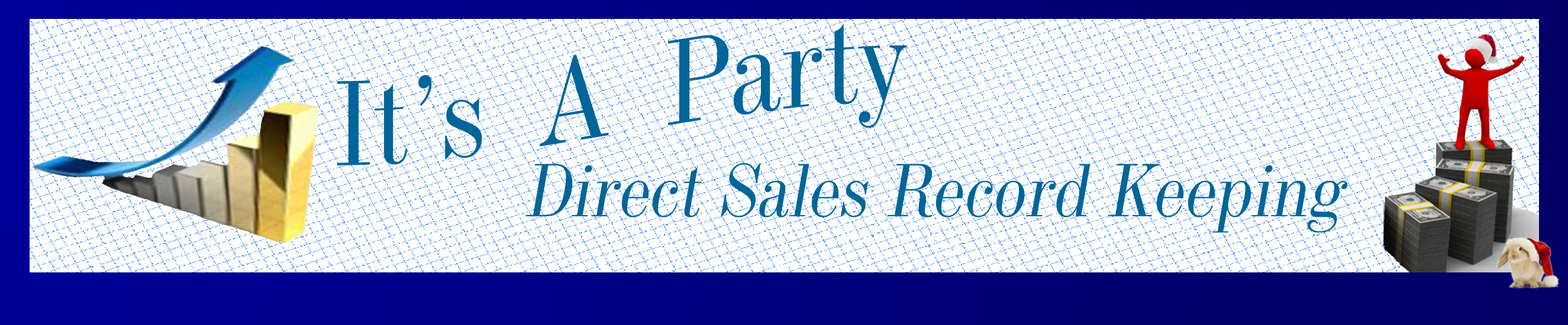
<style>
.page{position:relative;width:1568px;height:325px}
.page>*{position:absolute;margin:0}
.t1{font:117.9px "Industrial736BT-Roman";color:#006599}
.t2{font:73.7px "Industrial736BT-Roman";color:#006599;font-style:italic}
</style>
<div class="page">
<p class="t1" style="left:337px;top:23px;width:570px;height:143px">It’s  A  Party</p>
<p class="t2" style="left:525px;top:163px;width:823px;height:70px">Direct Sales Record Keeping</p>
</div>
